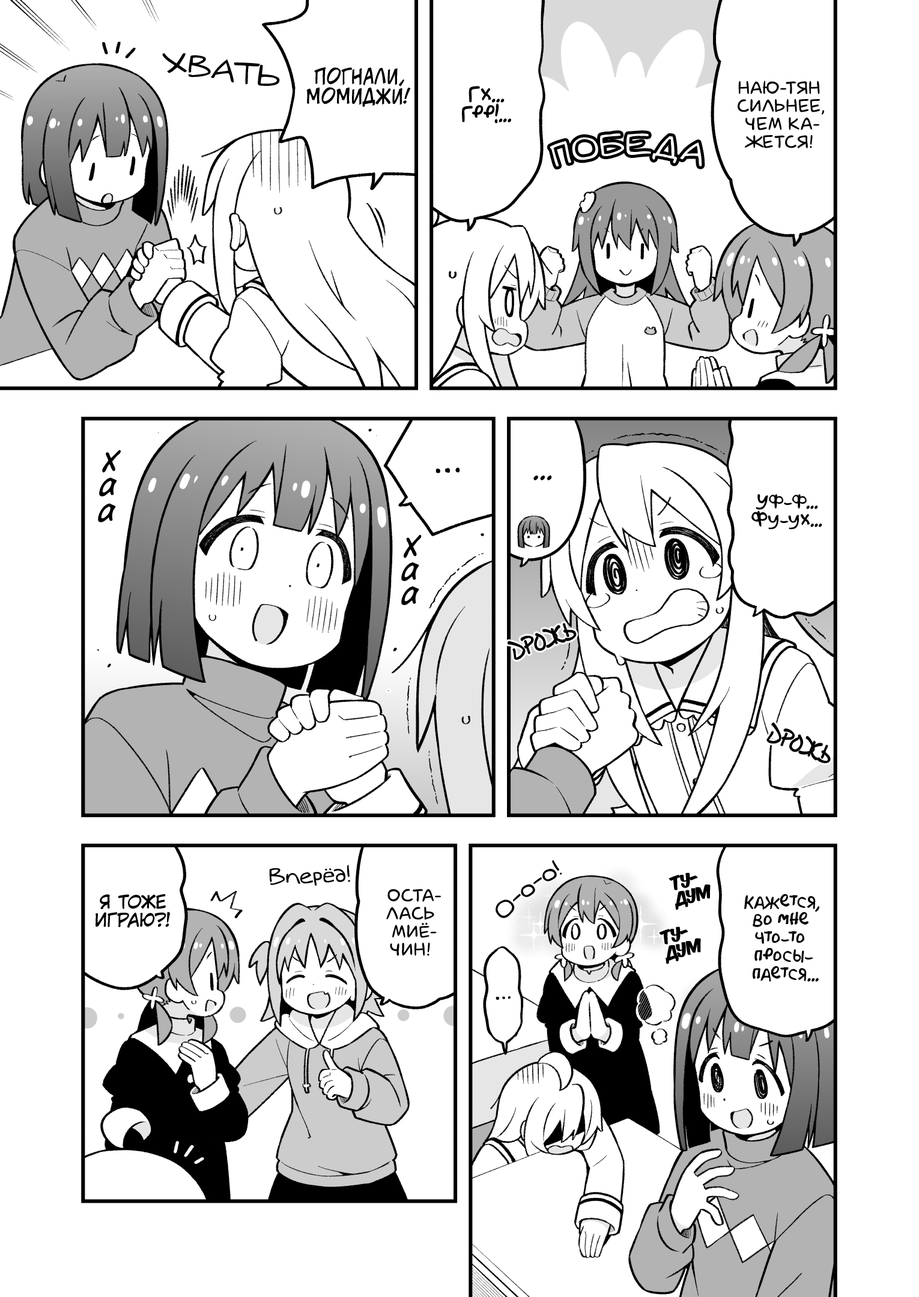
<style>
.page{position:relative;width:919px;height:1297px;background:#ffffff}
.page>*{position:absolute;margin:0}
.t1{font:28.8px "v_Augie";color:#000000;text-transform:uppercase;scale:1.1 1}
.t2{font:19.8px "v_CCJeffCampbell";color:#000000;text-transform:uppercase}
.t3{font:19.8px "AkbarPlain";color:#000000}
.t4{font:18px "laCartoonerie";color:#000000;text-transform:uppercase}
.t5{font:28.8px "v_Augie";color:#ffffff;text-transform:uppercase;font-weight:bold}
.t6{font:36px "v_CCDearDiary";color:#000000}
.t7{font:25.2px "KuraiVoice2";color:#000000;text-transform:uppercase}
.t8{font:18px "AkbarPlain";color:#000000}
.t9{font:25.2px "DSNote";color:#000000;scale:0.7 1}
.t10{font:21.6px "v_Augie";color:#000000}
.t11{font:16.2px "KomikaTitle-AxisRUS-LAT";color:#000000}
.t12{font:18px "KuraiVoice2";color:#000000;text-transform:uppercase}
</style>
<div class="page">
<p class="t1" style="left:162px;top:53px;width:118px;height:33px;rotate:8deg">хвать</p>
<p class="t2" style="left:306px;top:67px;width:105px;height:40px;text-align:center">Погнали,<br>Момиджи!</p>
<p class="t3" style="left:462px;top:86px;width:49px;height:38px;text-align:center">Гх...<br>Грр!...</p>
<p class="t4" style="left:738px;top:80px;width:86px;height:68px;text-align:center">Наю-тян<br>сильнее,<br>чем ка-<br>жется!</p>
<p class="t5" style="left:550px;top:133px;width:152px;height:34px">победа</p>
<p class="t6" style="left:102px;top:450px;width:19px;height:23px;rotate:-4deg">х</p>
<p class="t6" style="left:99px;top:478px;width:18px;height:19px">а</p>
<p class="t7" style="left:533px;top:475px;width:19px;height:6px">...</p>
<p class="t8" style="left:751px;top:494px;width:71px;height:36px;text-align:center">Уф-ф...<br>Фу-ух...</p>
<p class="t6" style="left:98px;top:503px;width:18px;height:20px">а</p>
<p class="t6" style="left:404px;top:535px;width:18px;height:24px;rotate:-7deg">х</p>
<p class="t6" style="left:401px;top:562px;width:18px;height:19px">а</p>
<p class="t6" style="left:401px;top:586px;width:18px;height:19px">а</p>
<p class="t9" style="left:508px;top:624px;width:68px;height:36px;rotate:-19deg">дрожь</p>
<p class="t9" style="left:767px;top:723px;width:63px;height:40px;rotate:22deg">дрожь</p>
<p class="t10" style="left:269px;top:865px;width:81px;height:21px;rotate:-2deg">Вперёд!</p>
<p class="t10" style="left:496px;top:860px;width:66px;height:58px;rotate:-39deg">О-о-о!</p>
<p class="t11" style="left:669px;top:873px;width:42px;height:37px;text-align:center;rotate:-15deg">ту-<br> дум</p>
<p class="t4" style="left:386px;top:889px;width:55px;height:67px;text-align:center">Оста-<br>лась<br>Миё-<br>чин!</p>
<p class="t12" style="left:96px;top:894px;width:74px;height:34px;text-align:center">Я тоже<br>играю?!</p>
<p class="t8" style="left:744px;top:894px;width:75px;height:88px;text-align:center">Кажется,<br>во мне<br>что-то<br>просы-<br>пается...</p>
<p class="t11" style="left:659px;top:927px;width:42px;height:38px;text-align:center;rotate:-15deg">ту-<br> дум</p>
</div>
